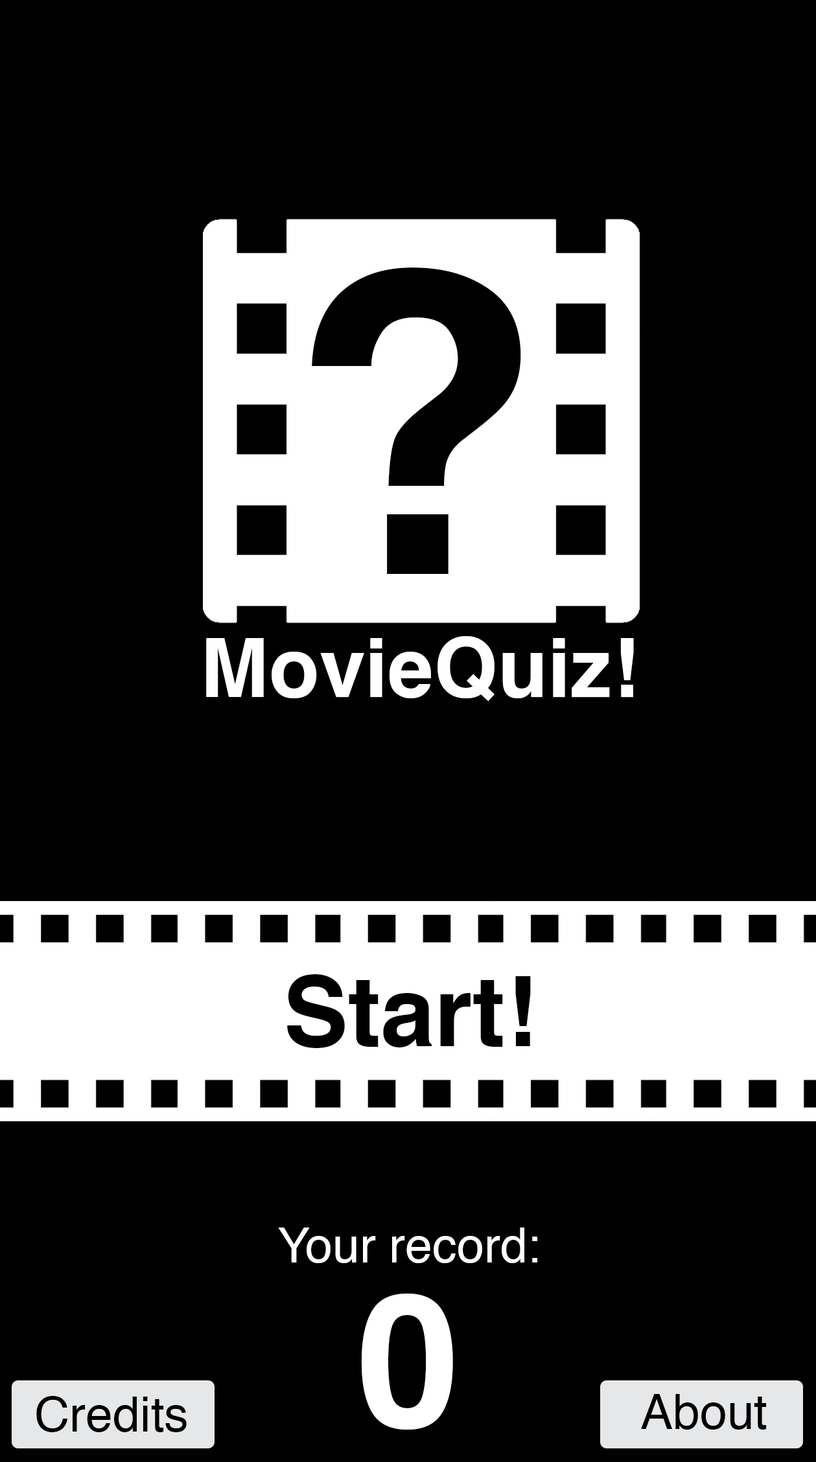
<style>
.page{position:relative;width:816px;height:1462px;background:#000000}
.page>*{position:absolute;margin:0}
.t1{font:421.5px "Helvetica-Bold";color:#000000}
.t2{font:82.2px "Helvetica-Bold";color:#ffffff}
.t3{font:97.2px "Helvetica-Bold";color:#000000}
.t4{font:48.7px "Helvetica";color:#ffffff}
.t5{font:186.5px "Helvetica-Bold";color:#ffffff}
.t6{font:48.7px "Helvetica";color:#000000}
</style>
<div class="page">
<p class="t1" style="left:312px;top:268px;width:209px;height:306px">?</p>
<p class="t2" style="left:206px;top:636px;width:428px;height:66px">MovieQuiz!</p>
<p class="t3" style="left:287px;top:974px;width:244px;height:74px">Start!</p>
<p class="t4" style="left:278px;top:1228px;width:259px;height:35px">Your record:</p>
<p class="t5" style="left:361px;top:1294px;width:92px;height:136px">0</p>
<p class="t6" style="left:36px;top:1396px;width:151px;height:36px">Credits</p>
<p class="t6" style="left:641px;top:1394px;width:125px;height:36px">About</p>
</div>
